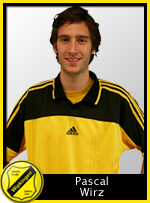
<style>
.page{position:relative;width:150px;height:203px}
.page>*{position:absolute;margin:0}
.t1{font:11px/11px "LucidaSans";letter-spacing:0.025em;color:#ffffff}
</style>
<div class="page">
<p class="t1" style="left:76px;top:176px;width:32px;height:20px;text-align:center">Pascal<br>Wirz</p>
</div>
